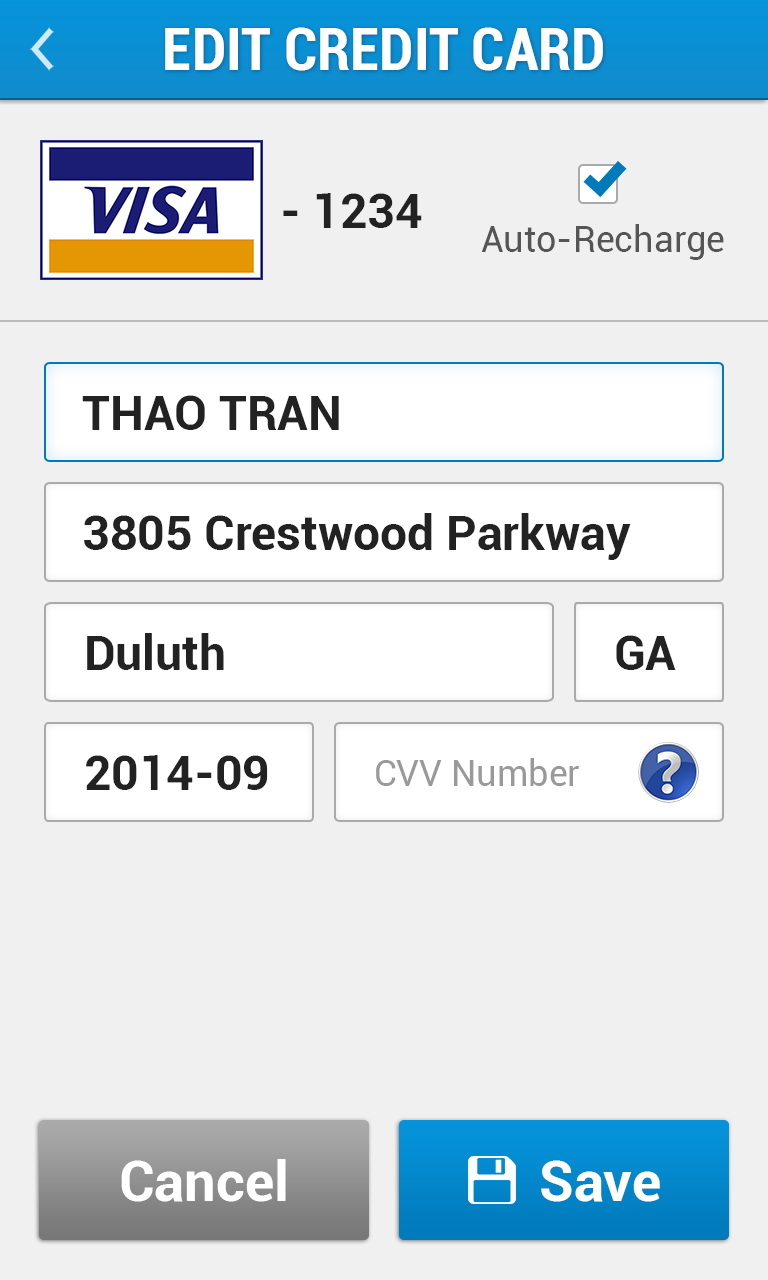
<style>
.page{position:relative;width:768px;height:1280px;background:#f0f0f0}
.page>*{position:absolute;margin:0}
.t1{font:60px "Roboto-BoldCondensed";color:#ffffff}
.t2{font:48px "Roboto-Bold";color:#222222}
.t3{font:36px "Roboto-Regular";color:#555555}
.t4{font:36px "Roboto-Regular";color:#999999}
.t5{font:56px "Roboto-Bold";color:#ffffff}
</style>
<div class="page">
<p class="t1" style="left:165px;top:27px;width:438px;height:44px">EDIT CREDIT CARD</p>
<p class="t2" style="left:283px;top:193px;width:139px;height:35px">- 1234</p>
<p class="t3" style="left:481px;top:224px;width:243px;height:36px">Auto-Recharge</p>
<p class="t2" style="left:82px;top:395px;width:257px;height:35px">THAO TRAN</p>
<p class="t2" style="left:84px;top:513px;width:547px;height:47px">3805 Crestwood Parkway</p>
<p class="t2" style="left:87px;top:633px;width:137px;height:37px">Duluth</p>
<p class="t2" style="left:616px;top:635px;width:60px;height:35px">GA</p>
<p class="t2" style="left:86px;top:755px;width:182px;height:35px">2014-09</p>
<p class="t4" style="left:376px;top:758px;width:203px;height:28px">CVV Number</p>
<p class="t5" style="left:121px;top:1159px;width:165px;height:43px">Cancel</p>
<p class="t5" style="left:541px;top:1160px;width:119px;height:42px">Save</p>
</div>
